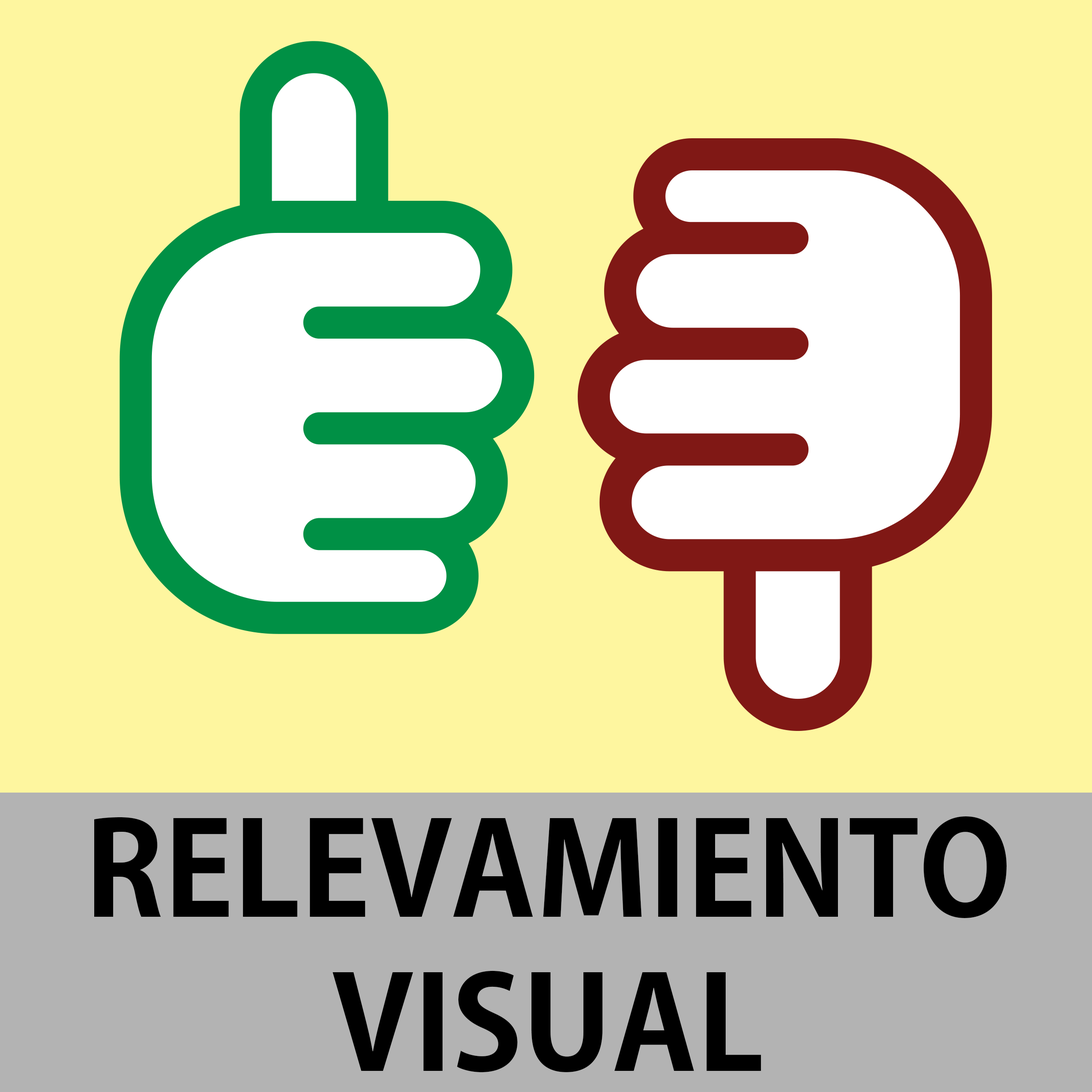
<style>
.page{position:relative;width:1092px;height:1092px;background:#fef69f}
.page>*{position:absolute;margin:0}
.t1{font:128.4px "KozGoPr6N-Bold";color:#000000}
</style>
<div class="page">
<p class="t1" style="left:94px;top:816px;width:913px;height:257px;text-align:center">RELEVAMIENTO VISUAL</p>
</div>
